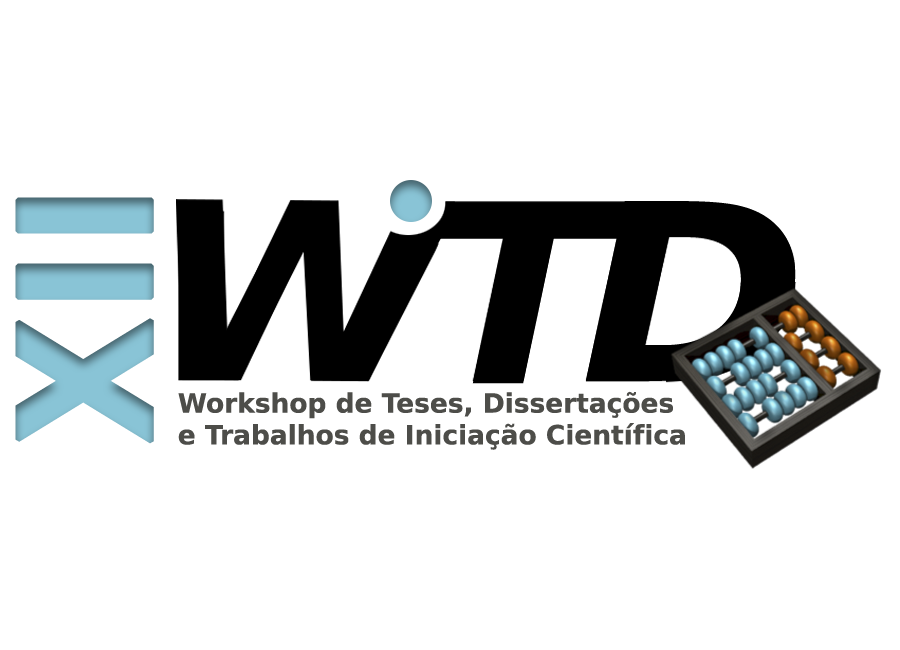
<style>
.page{position:relative;width:900px;height:650px;background:#ffffff}
.page>*{position:absolute;margin:0}
.t1{font:182.8px "DejaVuSansCondensed-Bold";color:#89c4d6;font-weight:bold}
.t2{font:246.3px "DejaVuSansCondensed-BoldOblique";color:#000000;scale:1.2 1}
.t3{font:245.5px "DejaVuSansCondensed-BoldOblique";color:#000000;scale:1.24 1}
.t4{font:26.5px "DejaVuSans-Bold";color:#4d4d49}
</style>
<div class="page">
<p class="t1" style="left:15px;top:197px;width:139px;height:247px;rotate:-90deg">XII</p>
<p class="t2" style="left:438px;top:203px;width:188px;height:181px">T</p>
<p class="t3" style="left:586px;top:201px;width:210px;height:180px">D</p>
<p class="t4" style="left:178px;top:391px;width:507px;height:59px">Workshop de Teses, Dissertações <br>e Trabalhos de Iniciação Científica</p>
</div>
